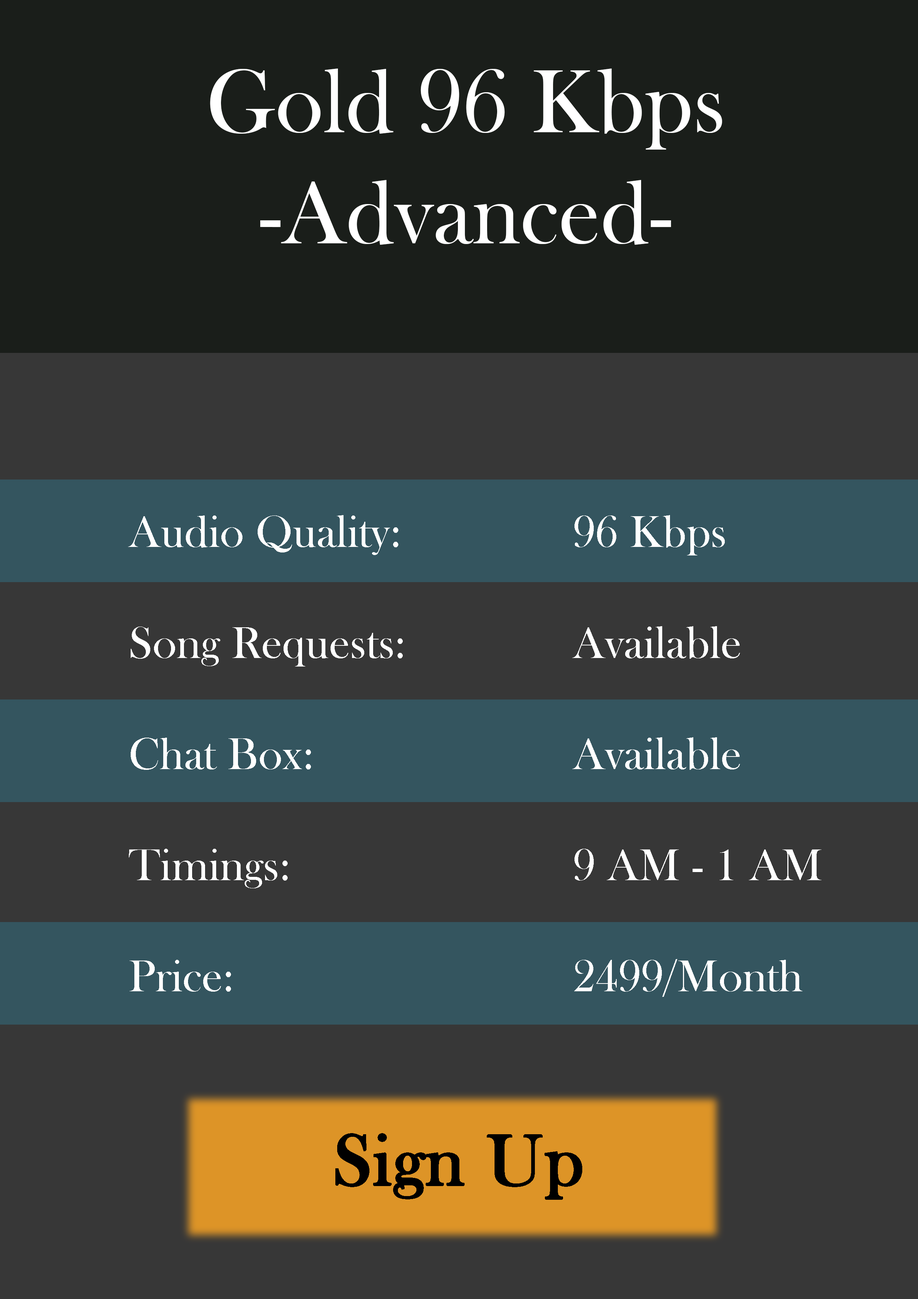
<style>
.page{position:relative;width:918px;height:1299px;background:#373737}
.page>*{position:absolute;margin:0}
.t1{font:92.6px "BaskOldFace";color:#fffefe}
.t2{font:46.3px "BaskOldFace";color:#ffffff}
.t3{font:74px "BaskOldFace";color:#000000;font-weight:bold}
</style>
<div class="page">
<p class="t1" style="left:210px;top:68px;width:512px;height:177px;text-align:center">Gold 96 Kbps<br>-Advanced-</p>
<p class="t2" style="left:128px;top:515px;width:275px;height:476px">Audio Quality:<br><br>Song Requests:<br><br>Chat Box: <br><br>Timings:<br><br>Price:</p>
<p class="t2" style="left:572px;top:515px;width:250px;height:482px">96 Kbps<br><br>Available<br><br>Available<br><br>9 AM - 1 AM<br><br>2499/Month</p>
<p class="t3" style="left:335px;top:1133px;width:247px;height:67px">Sign Up</p>
</div>
